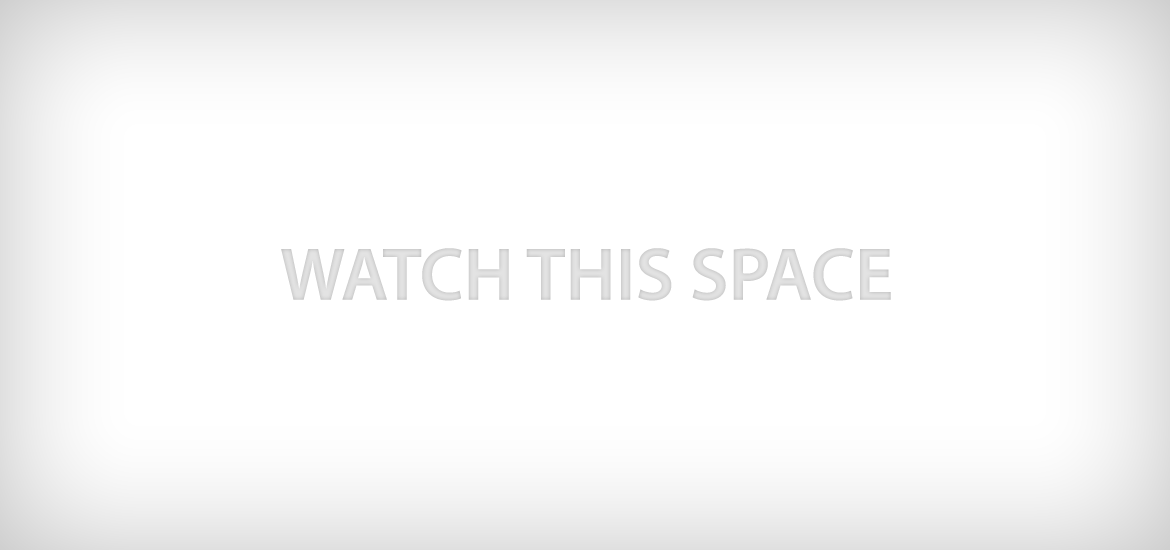
<style>
.page{position:relative;width:1170px;height:550px;background:#ffffff}
.page>*{position:absolute;margin:0}
.t1{font:75px "MyriadPro-Semibold";color:#e3e3e3;text-transform:uppercase}
</style>
<div class="page">
<p class="t1" style="left:281px;top:248px;width:610px;height:53px">Watch this space</p>
</div>
